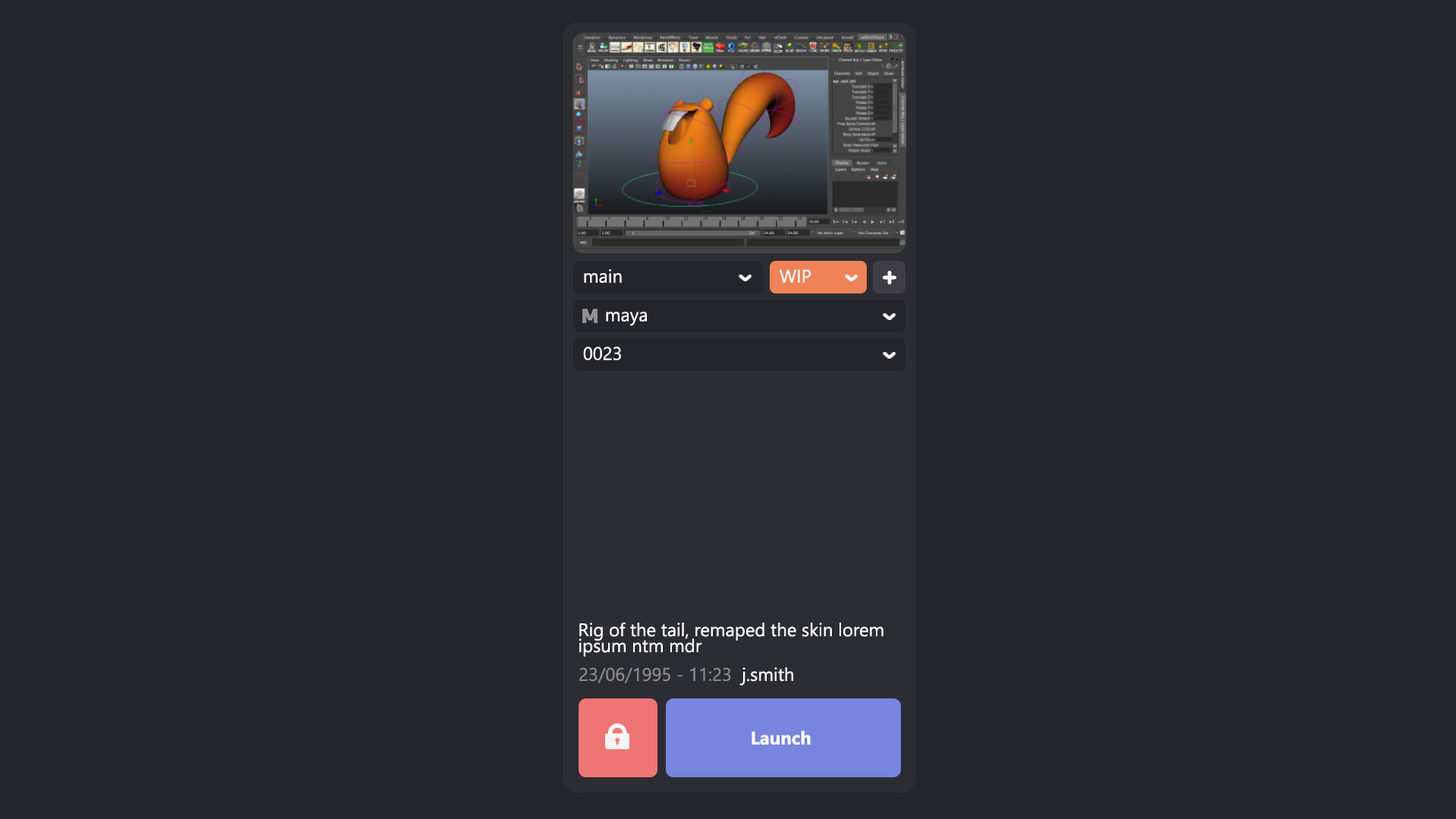
<style>
.page{position:relative;width:1456px;height:819px;background:#24242b}
.page>*{position:absolute;margin:0}
.t1{font:18.2px "LeelawadeeUI";color:#ffffff}
.t2{font:18.2px/15.9px "LeelawadeeUI";color:#ffffff}
.t3{font:18.2px "LeelawadeeUI";color:#8a8a8a}
.t4{font:18.2px "LeelawadeeUI-Bold";color:#ffffff}
</style>
<div class="page">
<p class="t1" style="left:584px;top:269px;width:38px;height:14px">main</p>
<p class="t1" style="left:780px;top:269px;width:31px;height:14px">WIP</p>
<p class="t1" style="left:606px;top:312px;width:41px;height:14px">maya</p>
<p class="t1" style="left:583px;top:347px;width:38px;height:13px">0023</p>
<p class="t2" style="left:579px;top:622px;width:304px;height:35px">Rig of the tail, remaped the skin lorem <br>ipsum ntm mdr</p>
<p class="t3" style="left:579px;top:667px;width:214px;height:19px">23/06/1995 - 11:23 <span class="t1"> j.smith</span></p>
<p class="t4" style="left:751px;top:730px;width:60px;height:15px">Launch</p>
</div>
